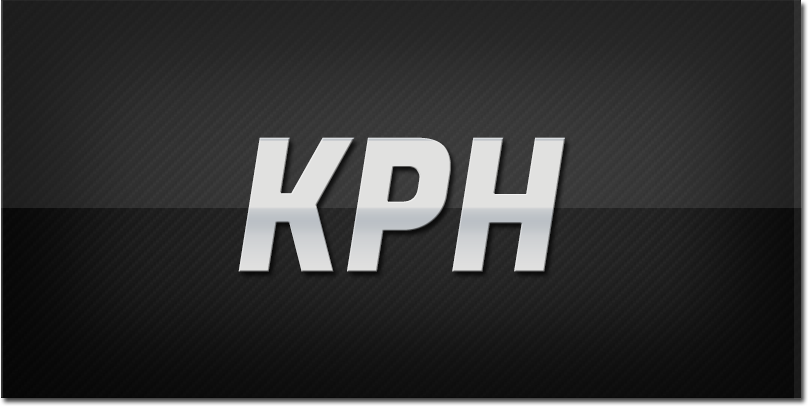
<style>
.page{position:relative;width:808px;height:406px}
.page>*{position:absolute;margin:0}
.t1{font:185.2px "FugazOne-Regular";color:#dfdfdf;scale:0.89 1}
</style>
<div class="page">
<p class="t1" style="left:238px;top:137px;width:327px;height:135px">KPH</p>
</div>
